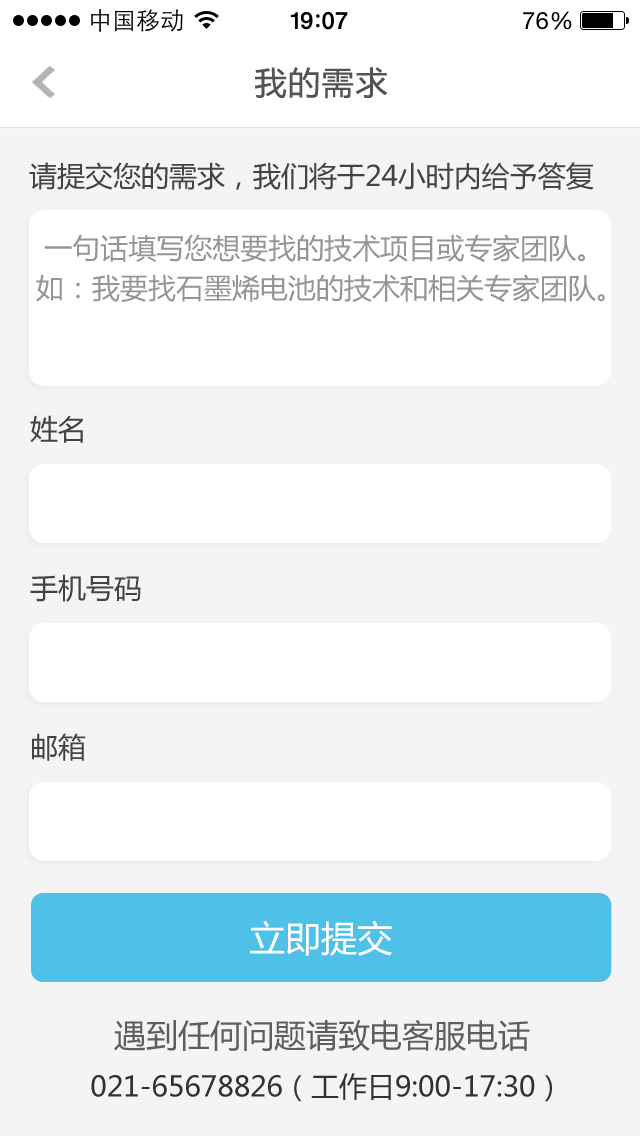
<style>
.page{position:relative;width:640px;height:1136px;background:#f4f4f4}
.page>*{position:absolute;margin:0}
.t1{font:32px "MicrosoftYaHei";letter-spacing:0.05em;color:#545353}
.t2{font:28px "MicrosoftYaHei";color:#434343}
.t3{font:28px/40px "MicrosoftYaHei";color:#959595}
.t4{font:36px "MicrosoftYaHei";color:#ffffff}
.t5{font:32px "MicrosoftYaHei";color:#5e5e5e}
.t6{font:28px "MicrosoftYaHei";color:#313131}
.t7{font:40px "MicrosoftYaHei";color:#313131}
</style>
<div class="page">
<p class="t1" style="left:254px;top:67px;width:133px;height:32px">我的需求</p>
<p class="t2" style="left:29px;top:162px;width:565px;height:28px">请提交您的需求，我们将于24小时内给予答复</p>
<p class="t3" style="left:36px;top:234px;width:569px;height:68px">一句话填写您想要找的技术项目或专家团队。<br>如：我要找石墨烯电池的技术和相关专家团队。</p>
<p class="t2" style="left:30px;top:415px;width:53px;height:28px">姓名</p>
<p class="t2" style="left:30px;top:574px;width:111px;height:28px">手机号码</p>
<p class="t2" style="left:32px;top:733px;width:54px;height:28px">邮箱</p>
<p class="t4" style="left:250px;top:920px;width:142px;height:36px">立即提交</p>
<p class="t5" style="left:114px;top:1019px;width:416px;height:32px">遇到任何问题请致电客服电话</p>
<p class="t6" style="left:91px;top:1073px;width:461px;height:29px"><span class="t7"> </span>021-65678826（工作日9:00-17:30）</p>
</div>
